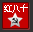
<style>
.page{position:relative;width:33px;height:32px;background:#c50000}
.page>*{position:absolute;margin:0}
.t1{font:10.4px "SimSun";letter-spacing:-0.25em;color:#ffffff}
</style>
<div class="page">
<p class="t1" style="left:4px;top:4px;width:24px;height:9px">红八十</p>
</div>
